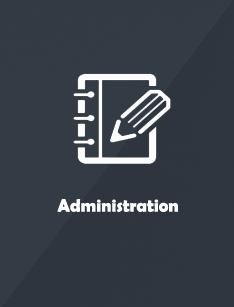
<style>
.page{position:relative;width:234px;height:307px;background:#2f353e}
.page>*{position:absolute;margin:0}
.t1{font:18px "BerlinSansFBDemi-Bold";color:#ffffff}
</style>
<div class="page">
<p class="t1" style="left:57px;top:198px;width:121px;height:15px">Administration</p>
</div>
